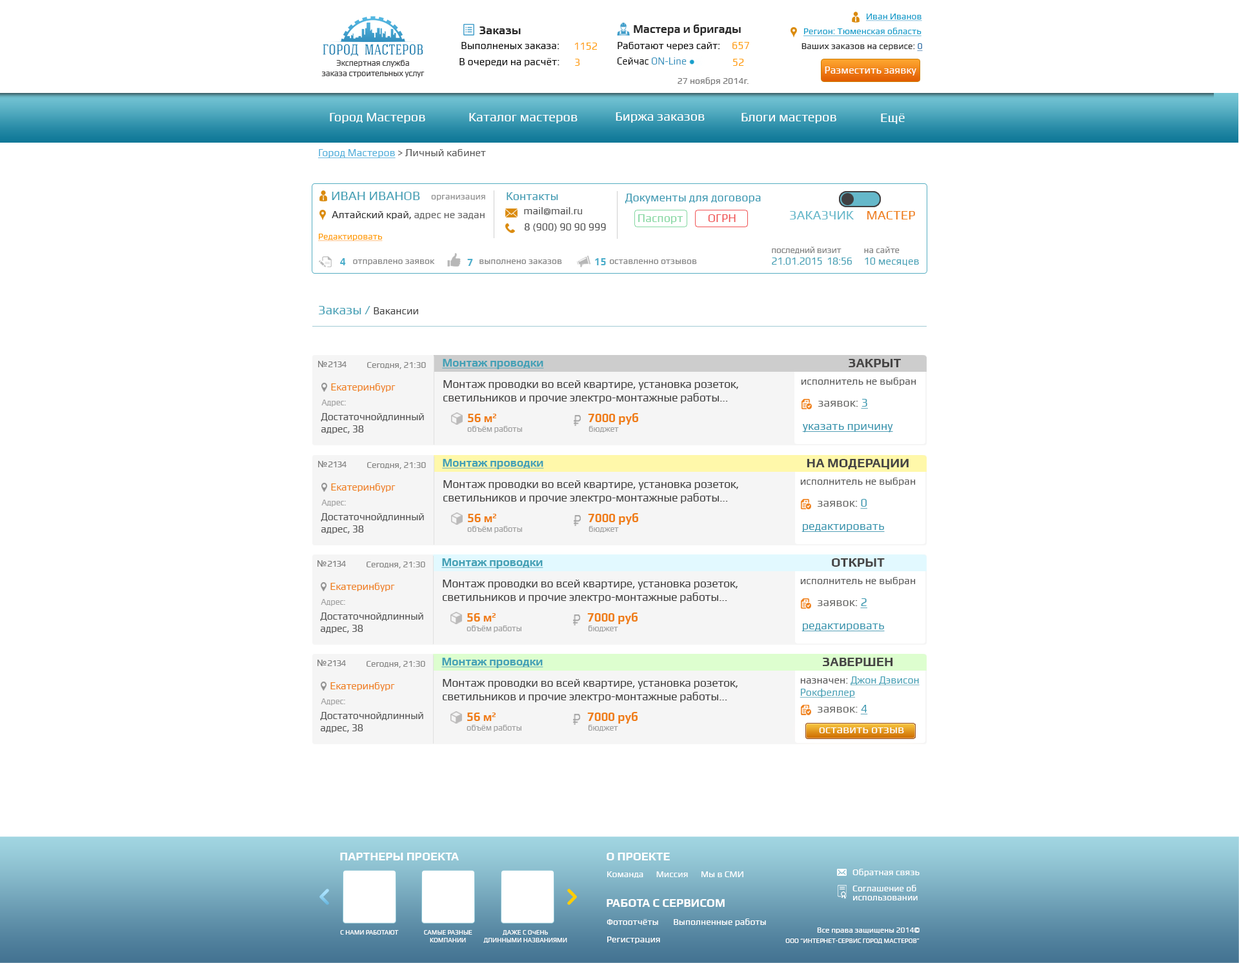
<style>
.page{position:relative;width:1239px;height:963px;background:#ffffff}
.page>*{position:absolute;margin:0}
.t1{font:9px "Play";color:#179ecb;text-decoration:underline}
.t2{font:11.6px "Play-Bold";color:#2a2a2a}
.t3{font:11.4px "Play-Bold";color:#2a2a2a}
.t4{font:9px "Play";color:#19a0cc;text-decoration:underline}
.t5{font:10.3px "Play";color:#000000}
.t6{font:10.3px "Play";color:#ff9e07}
.t7{font:10.2px "Play";color:#ff9e07}
.t8{font:9px "Play";color:#2a2a2a}
.t9{font:9px "Play";color:#226da7;text-decoration:underline}
.t10{font:8.4px "Play";letter-spacing:-0.016em;color:#403f3f}
.t11{font:10.3px "Play";color:#3c95bf;scale:0.95 1}
.t12{font:10.3px "Play";color:#000000;scale:0.95 1}
.t13{font:9px "Play";color:#7a7a7a}
.t14{font:10.3px "Play";color:#ffffff}
.t15{font:12.9px "Play";color:#ffffff}
.t16{font:10.3px "Play";color:#565656}
.t17{font:10.3px "Play";color:#4daeda;text-decoration:underline}
.t18{font:12.9px "Play";color:#45a1b6}
.t19{font:9px "Play";color:#909090}
.t20{font:11.6px "Play";color:#3c9ab2}
.t21{font:11.6px "Play";color:#3c9ab3}
.t22{font:10.3px "Play";color:#4c4c4c}
.t23{font:10.3px "Play";color:#2d2d2d}
.t24{font:10.3px "Play";color:#616161}
.t25{font:11.6px "Play";color:#84d7a1}
.t26{font:11.6px "Play";color:#f05253}
.t27{font:12.9px "Play";color:#65b8ca}
.t28{font:12.9px "Play";color:#ee7e18}
.t29{font:9px "Play";color:#ff9e07;text-decoration:underline}
.t30{font:10.5px/11.6px "Play";letter-spacing:-0.02em;color:#45a1b6}
.t31{font:9.2px/11.6px "Play";letter-spacing:-0.02em;color:#848484}
.t32{font:10.5px/11.6px "Play";color:#45a1b6}
.t33{font:9.2px/11.6px "Play";color:#848484}
.t34{font:10.3px "Play-Bold";color:#4caecb}
.t35{font:9px "Play";color:#858585}
.t36{font:10.3px "Play";color:#424242}
.t37{font:9px "Play";letter-spacing:-0.08em;color:#818181}
.t38{font:9px "ArialMT";letter-spacing:-0.08em;color:#818181}
.t39{font:9px "Play";letter-spacing:-0.016em;color:#888887}
.t40{font:11.6px "Play-Bold";letter-spacing:-0.016em;color:#45a1b6;text-decoration:underline}
.t41{font:12.9px "Play-Bold";color:#464545}
.t42{font:10.3px "Play";color:#585858}
.t43{font:10.3px "Play";letter-spacing:-0.016em;color:#ef7e18}
.t44{font:11.6px "Play";letter-spacing:-0.016em;color:#403f3f}
.t45{font:8.4px "Play";letter-spacing:-0.016em;color:#a2a2a2}
.t46{font:11.6px "Play";color:#676765}
.t47{font:11.6px "Play";color:#3c9ab2;text-decoration:underline}
.t48{font:10.3px "Play";letter-spacing:-0.016em;color:#515151}
.t49{font:12px "Play-Bold";letter-spacing:-0.016em;color:#ef7e18}
.t50{font:12.1px "Play-Bold";letter-spacing:-0.016em;color:#ef7e18}
.t51{font:11.6px "Play";color:#3494ae;text-decoration:underline}
.t52{font:10.3px "Play";color:#45a1b6;text-decoration:underline}
.t53{font:11.6px "Play";color:#ffffff}
.t54{font:11.6px "Play-Bold";color:#ffffff;text-transform:uppercase}
.t55{font:9px "Play";color:#ffffff}
.t56{font:9px/6.5px "Play";color:#ffffff}
.t57{font:6.4px "Play";color:#ffffff;text-transform:uppercase}
.t58{font:6.4px/5.2px "Play";color:#ffffff;text-transform:uppercase}
.t59{font:6.4px "Play";color:#ffffff}
.t60{font:7.7px "Play";color:#ffffff}
</style>
<div class="page">
<p class="t1" style="left:866px;top:14px;width:56px;height:7px">Иван Иванов</p>
<p class="t2" style="left:479px;top:26px;width:42px;height:8px">Заказы</p>
<p class="t3" style="left:634px;top:25px;width:107px;height:10px">Мастера и бригады</p>
<p class="t4" style="left:803px;top:28px;width:118px;height:8px">Регион: Тюменская область</p>
<p class="t5" style="left:461px;top:42px;width:98px;height:7px">Выполненых заказа:</p>
<p class="t5" style="left:617px;top:42px;width:103px;height:8px">Работают через сайт:</p>
<p class="t6" style="left:732px;top:42px;width:17px;height:7px">657</p>
<p class="t7" style="left:574px;top:43px;width:23px;height:7px">1152</p>
<p class="t8" style="left:801px;top:43px;width:122px;height:8px">Ваших заказов на сервисе: <span class="t9">0</span></p>
<p class="t10" style="left:321px;top:60px;width:104px;height:17px;text-align:center">Экспертная служба <br>заказа строительных услуг</p>
<p class="t5" style="left:459px;top:58px;width:100px;height:8px">В очереди на расчёт:</p>
<p class="t7" style="left:575px;top:59px;width:5px;height:7px">3</p>
<p class="t11" style="left:617px;top:57px;width:69px;height:8px"><span class="t12">Сейчас </span>ON-Line</p>
<p class="t6" style="left:733px;top:59px;width:11px;height:7px">52</p>
<p class="t13" style="left:677px;top:77px;width:71px;height:8px">27 ноября 2014г.</p>
<p class="t14" style="left:825px;top:66px;width:91px;height:9px">Разместить заявку</p>
<p class="t15" style="left:330px;top:113px;width:95px;height:10px">Город Мастеров</p>
<p class="t15" style="left:469px;top:113px;width:108px;height:10px">Каталог мастеров</p>
<p class="t15" style="left:616px;top:112px;width:89px;height:11px">Биржа заказов</p>
<p class="t15" style="left:741px;top:113px;width:95px;height:10px">Блоги мастеров</p>
<p class="t15" style="left:881px;top:114px;width:24px;height:10px">Ещё</p>
<p class="t16" style="left:318px;top:149px;width:168px;height:9px"><span class="t17">Город Мастеров </span>&gt; Личный кабинет</p>
<p class="t18" style="left:332px;top:192px;width:88px;height:8px">ИВАН ИВАНОВ</p>
<p class="t19" style="left:431px;top:195px;width:54px;height:6px">организация</p>
<p class="t20" style="left:506px;top:192px;width:52px;height:8px">Контакты</p>
<p class="t21" style="left:625px;top:194px;width:136px;height:10px">Документы для договора</p>
<p class="t22" style="left:524px;top:207px;width:58px;height:8px">mail@mail.ru</p>
<p class="t23" style="left:332px;top:211px;width:153px;height:8px">Алтайский край, <span class="t24">адрес не задан</span></p>
<p class="t25" style="left:638px;top:214px;width:45px;height:10px">Паспорт</p>
<p class="t26" style="left:708px;top:214px;width:28px;height:8px">ОГРН</p>
<p class="t27" style="left:790px;top:211px;width:64px;height:8px">ЗАКАЗЧИК</p>
<p class="t28" style="left:867px;top:211px;width:48px;height:8px">МАСТЕР</p>
<p class="t29" style="left:318px;top:234px;width:65px;height:7px">Редактировать</p>
<p class="t22" style="left:525px;top:223px;width:81px;height:9px">8 (900) 90 90 999</p>
<p class="t30" style="left:772px;top:246px;width:80px;height:19px"><span class="t31">последний визит<br></span>21.01.2015  18:56</p>
<p class="t32" style="left:864px;top:246px;width:55px;height:20px"><span class="t33">на сайте<br></span>10 месяцев</p>
<p class="t34" style="left:340px;top:258px;width:6px;height:7px">4</p>
<p class="t35" style="left:353px;top:259px;width:82px;height:6px">отправлено заявок</p>
<p class="t34" style="left:467px;top:259px;width:6px;height:7px">7</p>
<p class="t35" style="left:479px;top:259px;width:83px;height:5px">выполнено заказов</p>
<p class="t34" style="left:595px;top:258px;width:11px;height:7px">15</p>
<p class="t35" style="left:610px;top:259px;width:87px;height:5px">оставленно отзывов</p>
<p class="t18" style="left:319px;top:306px;width:99px;height:8px">Заказы / <span class="t36">Вакансии</span></p>
<p class="t37" style="left:318px;top:361px;width:28px;height:6px"><span class="t38">№</span> 2134</p>
<p class="t39" style="left:367px;top:362px;width:59px;height:7px">Сегодня, 21:30</p>
<p class="t40" style="left:442px;top:359px;width:102px;height:10px">Монтаж проводки</p>
<p class="t41" style="left:848px;top:359px;width:53px;height:8px">ЗАКРЫТ</p>
<p class="t42" style="left:801px;top:377px;width:115px;height:9px">исполнитель не выбран</p>
<p class="t43" style="left:331px;top:383px;width:64px;height:9px">Екатеринбург</p>
<p class="t44" style="left:443px;top:380px;width:295px;height:23px">Монтаж проводки во всей квартире, установка розеток, светильников и прочие электро-монтажные работы...</p>
<p class="t45" style="left:321px;top:399px;width:25px;height:7px">Адрес:</p>
<p class="t46" style="left:818px;top:399px;width:50px;height:10px">заявок: <span class="t47">3</span></p>
<p class="t48" style="left:321px;top:413px;width:103px;height:21px">Достаточнойдлинный адрес, 38</p>
<p class="t49" style="left:468px;top:414px;width:28px;height:8px">56 м2</p>
<p class="t50" style="left:588px;top:413px;width:50px;height:12px">7000 руб</p>
<p class="t45" style="left:467px;top:426px;width:55px;height:7px">объём работы</p>
<p class="t45" style="left:588px;top:426px;width:31px;height:6px">бюджет</p>
<p class="t51" style="left:802px;top:424px;width:91px;height:8px">указать причину</p>
<p class="t37" style="left:318px;top:461px;width:28px;height:6px"><span class="t38">№</span> 2134</p>
<p class="t39" style="left:367px;top:462px;width:59px;height:7px">Сегодня, 21:30</p>
<p class="t40" style="left:442px;top:459px;width:102px;height:10px">Монтаж проводки</p>
<p class="t41" style="left:806px;top:459px;width:102px;height:10px">НА МОДЕРАЦИИ</p>
<p class="t43" style="left:331px;top:483px;width:64px;height:9px">Екатеринбург</p>
<p class="t44" style="left:443px;top:480px;width:295px;height:23px">Монтаж проводки во всей квартире, установка розеток, светильников и прочие электро-монтажные работы...</p>
<p class="t42" style="left:800px;top:477px;width:116px;height:9px">исполнитель не выбран</p>
<p class="t45" style="left:321px;top:499px;width:25px;height:7px">Адрес:</p>
<p class="t46" style="left:817px;top:499px;width:50px;height:10px">заявок: <span class="t47">0</span></p>
<p class="t48" style="left:321px;top:513px;width:103px;height:21px">Достаточнойдлинный адрес, 38</p>
<p class="t49" style="left:468px;top:514px;width:28px;height:8px">56 м2</p>
<p class="t50" style="left:588px;top:513px;width:50px;height:12px">7000 руб</p>
<p class="t45" style="left:467px;top:526px;width:55px;height:7px">объём работы</p>
<p class="t45" style="left:588px;top:526px;width:31px;height:6px">бюджет</p>
<p class="t51" style="left:801px;top:524px;width:84px;height:8px">редактировать</p>
<p class="t37" style="left:317px;top:560px;width:29px;height:6px"><span class="t38">№</span> 2134</p>
<p class="t39" style="left:366px;top:561px;width:59px;height:7px">Сегодня, 21:30</p>
<p class="t40" style="left:441px;top:558px;width:102px;height:10px">Монтаж проводки</p>
<p class="t41" style="left:832px;top:558px;width:53px;height:8px">ОТКРЫТ</p>
<p class="t44" style="left:443px;top:579px;width:294px;height:24px">Монтаж проводки во всей квартире, установка розеток, светильников и прочие электро-монтажные работы...</p>
<p class="t42" style="left:800px;top:577px;width:116px;height:8px">исполнитель не выбран</p>
<p class="t43" style="left:330px;top:583px;width:65px;height:9px">Екатеринбург</p>
<p class="t45" style="left:321px;top:599px;width:24px;height:7px">Адрес:</p>
<p class="t46" style="left:817px;top:598px;width:50px;height:10px">заявок: <span class="t47">2</span></p>
<p class="t48" style="left:320px;top:612px;width:103px;height:21px">Достаточнойдлинный адрес, 38</p>
<p class="t49" style="left:467px;top:613px;width:28px;height:8px">56 м2</p>
<p class="t50" style="left:587px;top:612px;width:50px;height:12px">7000 руб</p>
<p class="t45" style="left:466px;top:625px;width:55px;height:7px">объём работы</p>
<p class="t45" style="left:588px;top:625px;width:30px;height:7px">бюджет</p>
<p class="t51" style="left:801px;top:623px;width:84px;height:9px">редактировать</p>
<p class="t37" style="left:317px;top:659px;width:29px;height:7px"><span class="t38">№</span> 2134</p>
<p class="t39" style="left:366px;top:661px;width:59px;height:7px">Сегодня, 21:30</p>
<p class="t40" style="left:441px;top:657px;width:102px;height:11px">Монтаж проводки</p>
<p class="t41" style="left:823px;top:657px;width:70px;height:9px">ЗАВЕРШЕН</p>
<p class="t52" style="left:799px;top:676px;width:120px;height:21px"><span class="t42">назначен: </span>Джон Дэвисон Рокфеллер</p>
<p class="t43" style="left:330px;top:682px;width:65px;height:9px">Екатеринбург</p>
<p class="t44" style="left:443px;top:679px;width:294px;height:23px">Монтаж проводки во всей квартире, установка розеток, светильников и прочие электро-монтажные работы...</p>
<p class="t45" style="left:321px;top:698px;width:24px;height:7px">Адрес:</p>
<p class="t48" style="left:320px;top:712px;width:103px;height:20px">Достаточнойдлинный адрес, 38</p>
<p class="t49" style="left:467px;top:712px;width:28px;height:9px">56 м2</p>
<p class="t50" style="left:587px;top:712px;width:50px;height:11px">7000 руб</p>
<p class="t46" style="left:817px;top:705px;width:51px;height:9px">заявок: <span class="t47">4</span></p>
<p class="t45" style="left:466px;top:725px;width:55px;height:7px">объём работы</p>
<p class="t45" style="left:588px;top:725px;width:30px;height:6px">бюджет</p>
<p class="t53" style="left:819px;top:727px;width:85px;height:6px">оставить отзыв</p>
<p class="t53" style="left:819px;top:727px;width:85px;height:6px">оставить отзыв</p>
<p class="t54" style="left:340px;top:852px;width:119px;height:8px">Партнеры проекта</p>
<p class="t54" style="left:606px;top:852px;width:64px;height:8px">О проекте</p>
<p class="t55" style="left:852px;top:868px;width:67px;height:8px">Обратная связь</p>
<p class="t55" style="left:607px;top:871px;width:136px;height:6px">Команда      Миссия      Мы в СМИ</p>
<p class="t56" style="left:852px;top:885px;width:65px;height:15px;text-align:justify">Соглашение об <br>использовании</p>
<p class="t54" style="left:606px;top:899px;width:119px;height:7px">Работа с сервисом</p>
<p class="t57" style="left:340px;top:930px;width:59px;height:4px">C нами работают</p>
<p class="t58" style="left:424px;top:930px;width:48px;height:12px;text-align:center">Самые разные<br>компании</p>
<p class="t58" style="left:483px;top:930px;width:84px;height:13px;text-align:center">Даже с очень<br>длинными названиями</p>
<p class="t55" style="left:606px;top:918px;width:160px;height:8px">Фотоотчёты       Выполненные работы</p>
<p class="t59" style="left:785px;top:927px;width:134px;height:16px;text-align:right"><span class="t60">Все права защищены 2014©<br></span>ООО “ИНТЕРНЕТ-СЕРВИС ГОРОД МАСТЕРОВ”</p>
<p class="t55" style="left:607px;top:936px;width:53px;height:7px">Регистрация</p>
</div>
